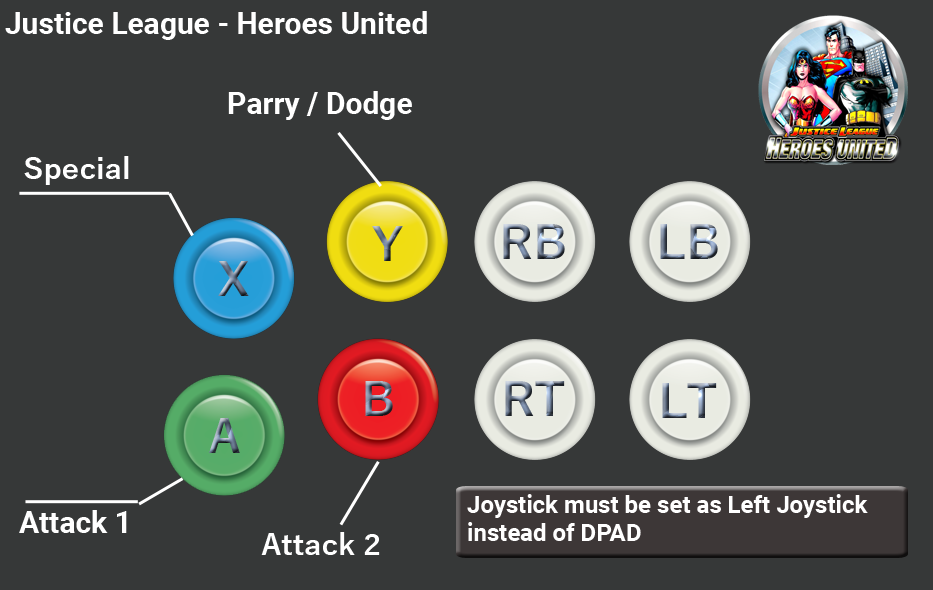
<style>
.page{position:relative;width:933px;height:590px;background:#363838}
.page>*{position:absolute;margin:0}
.t1{font:30px "Roboto-Bold";color:#ffffff}
.t2{font:30px "YuGothic-Bold";color:#ffffff}
</style>
<div class="page">
<p class="t1" style="left:5px;top:11px;width:422px;height:29px">Justice League - Heroes United</p>
<p class="t1" style="left:228px;top:91px;width:184px;height:29px">Parry / Dodge</p>
<p class="t2" style="left:24px;top:156px;width:105px;height:29px">Special</p>
<p class="t1" style="left:19px;top:510px;width:108px;height:23px">Attack 1</p>
<p class="t2" style="left:261px;top:532px;width:119px;height:23px">Attack 2</p>
</div>
